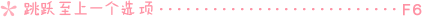
<style>
.page{position:relative;width:422px;height:17px;background:#ffffff}
.page>*{position:absolute;margin:0}
.t1{font:18px "¢è?";color:#ff93a5}
</style>
<div class="page">
<p class="t1" style="left:24px;top:0px;width:129px;height:16px">跳跃至上一个选项</p>
</div>
